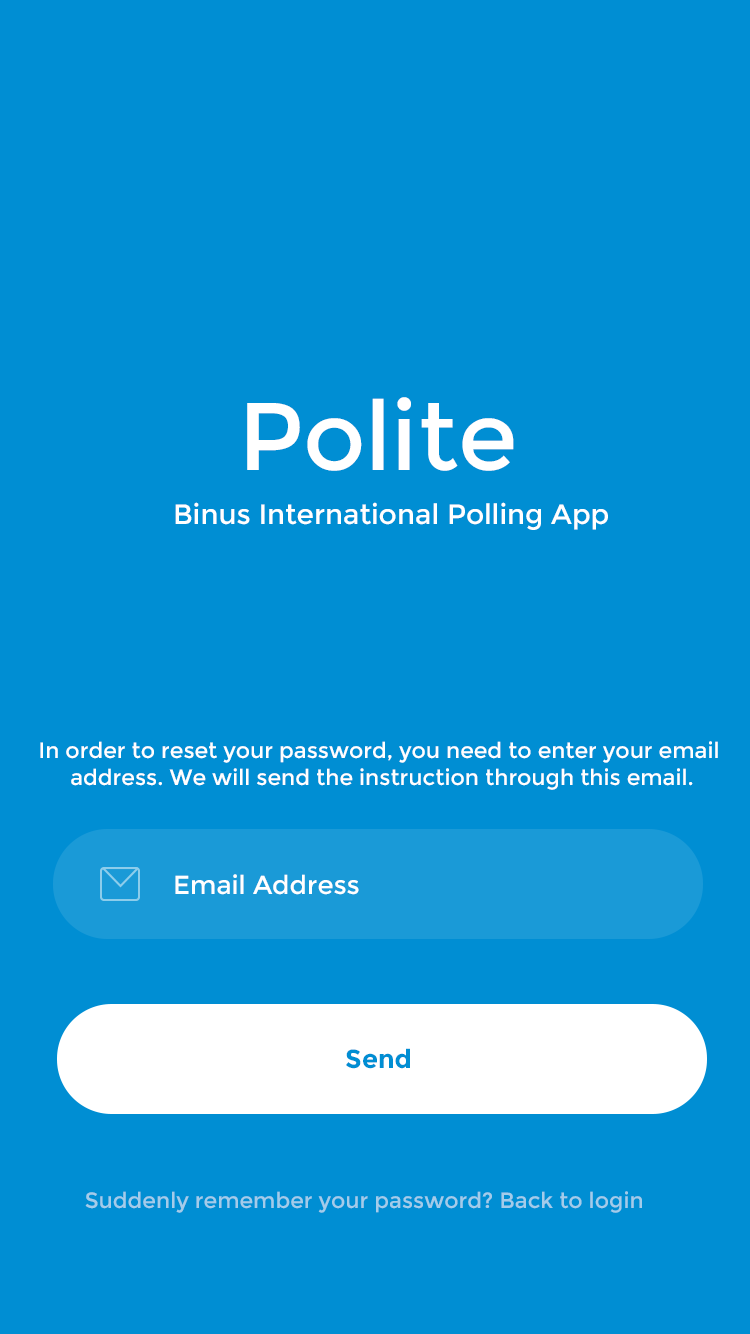
<style>
.page{position:relative;width:750px;height:1334px;background:#008ed3}
.page>*{position:absolute;margin:0}
.t1{font:96px "Montserrat-Regular";color:#ffffff}
.t2{font:28px "Montserrat-Regular";color:#ffffff}
.t3{font:22px "Montserrat-Regular";color:#ffffff}
.t4{font:26px "Montserrat-Regular";color:#ffffff}
.t5{font:26px "Montserrat-Bold";color:#008ed3}
.t6{font:22px "Montserrat-Regular";color:#a3ccea}
</style>
<div class="page">
<p class="t1" style="left:247px;top:397px;width:267px;height:74px">Polite</p>
<p class="t2" style="left:175px;top:502px;width:433px;height:28px">Binus International Polling App</p>
<p class="t3" style="left:40px;top:741px;width:678px;height:49px;text-align:center">In order to reset your password, you need to enter your email <br>address. We will send the instruction through this email.</p>
<p class="t4" style="left:175px;top:874px;width:184px;height:21px">Email Address</p>
<p class="t5" style="left:346px;top:1048px;width:64px;height:21px">Send</p>
<p class="t6" style="left:85px;top:1191px;width:557px;height:22px">Suddenly remember your password? Back to login</p>
</div>
